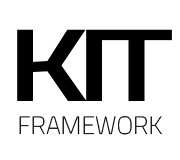
<style>
.page{position:relative;width:180px;height:160px;background:#ffffff}
.page>*{position:absolute;margin:0}
.t1{font:25px/33px "TitilliumWeb-Thin";color:#000000;text-transform:uppercase}
.t2{font:103.7px/30px "TitilliumWeb-SemiBold";letter-spacing:-0.1em;color:#000000;text-transform:uppercase;scale:1.37 1}
</style>
<div class="page">
<p class="t1" style="left:17px;top:29px;width:155px;height:106px;text-align:center"><span class="t2">KIT<br></span>Framework</p>
</div>
